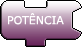
<style>
.page{position:relative;width:82px;height:47px;background:#ffffff}
.page>*{position:absolute;margin:0}
.t1{font:11px "Verdana";color:#ffffff}
</style>
<div class="page">
<p class="t1" style="left:8px;top:13px;width:56px;height:12px">POTÊNCIA</p>
</div>
